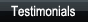
<style>
.page{position:relative;width:88px;height:22px}
.page>*{position:absolute;margin:0}
.t1{font:14px "ArialNarrow";color:#ffffff}
</style>
<div class="page">
<p class="t1" style="left:11px;top:5px;width:64px;height:12px">Testimonials</p>
</div>
